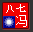
<style>
.page{position:relative;width:33px;height:32px;background:#f20000}
.page>*{position:absolute;margin:0}
.t1{font:10.4px "SimSun";color:#ffffff}
.t2{font:11.7px "SimSun";color:#ffffff}
</style>
<div class="page">
<p class="t1" style="left:6px;top:4px;width:20px;height:9px">八七</p>
<p class="t2" style="left:16px;top:15px;width:11px;height:12px">冯</p>
</div>
